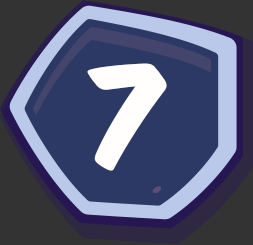
<style>
.page{position:relative;width:253px;height:245px;background:#2c3964}
.page>*{position:absolute;margin:0}
.t1{font:120px "KomikaAxis";color:#fffefd}
</style>
<div class="page">
<p class="t1" style="left:87px;top:63px;width:80px;height:108px">7</p>
</div>
